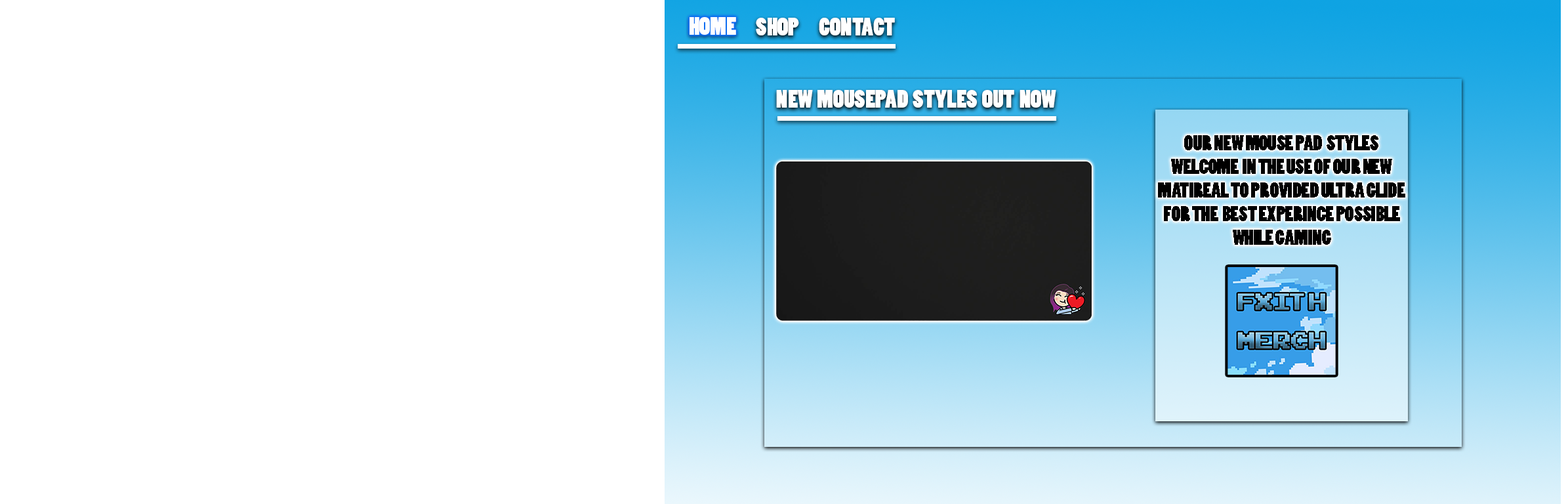
<style>
.page{position:relative;width:1568px;height:504px;background:#ffffff}
.page>*{position:absolute;margin:0}
.t1{font:23.6px "PoplarStd";color:#ffffff}
.t2{font:19.7px "PoplarStd";color:#000000}
</style>
<div class="page">
<p class="t1" style="left:690px;top:17px;width:46px;height:18px">HOME</p>
<p class="t1" style="left:756px;top:18px;width:43px;height:17px">SHOP</p>
<p class="t1" style="left:819px;top:18px;width:76px;height:17px">CONTACT</p>
<p class="t1" style="left:776px;top:90px;width:280px;height:18px">NEW  MOUSEPAD  STYLES  OUT  NOW</p>
<p class="t2" style="left:1158px;top:135px;width:247px;height:110px;text-align:center">OUR NEW MOUSE PAD  STYLES WELCOME  IN THE USE OF OUR NEW MATIREAL TO PROVIDED ULTRA GLIDE FOR THE  BEST EXPERINCE POSSIBLE WHILE GAMING</p>
</div>
